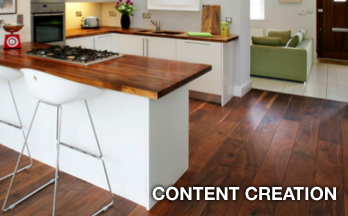
<style>
.page{position:relative;width:348px;height:216px}
.page>*{position:absolute;margin:0}
.t1{font:18px "HelveticaNeue-Bold";color:#ffffff}
</style>
<div class="page">
<p class="t1" style="left:152px;top:186px;width:184px;height:15px">CONTENT CREATION</p>
</div>
